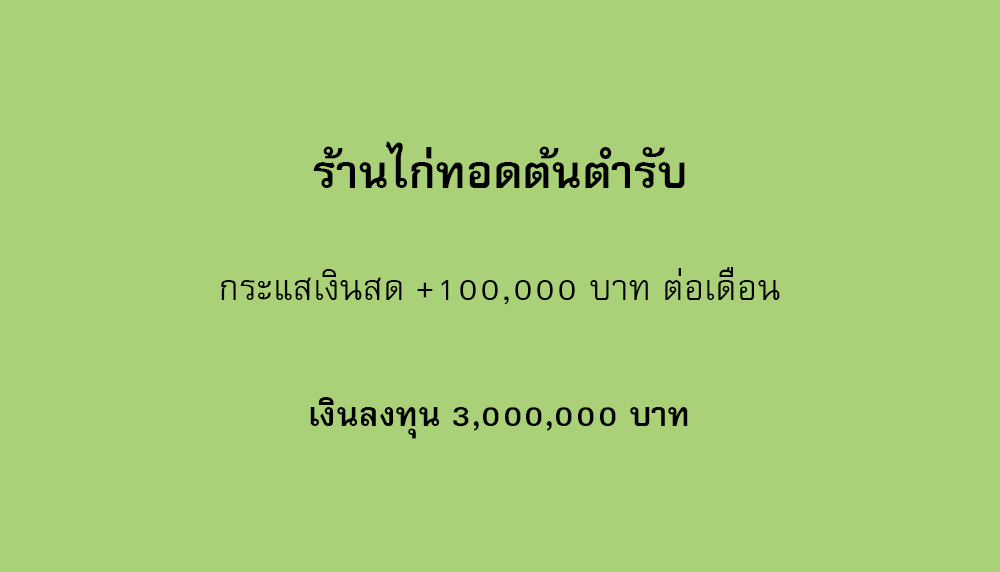
<style>
.page{position:relative;width:1000px;height:572px;background:#aad178}
.page>*{position:absolute;margin:0}
.t1{font:64px "FreesiaUPCBold";color:#000000}
.t2{font:50px "FreesiaUPC";color:#000000}
.t3{font:47px "FreesiaUPCBold";color:#000000}
</style>
<div class="page">
<p class="t1" style="left:313px;top:141px;width:372px;height:47px">ร้านไก่ทอดต้นตำรับ</p>
<p class="t2" style="left:221px;top:267px;width:559px;height:38px">กระแสเงินสด +100,000 บาท ต่อเดือน</p>
<p class="t3" style="left:310px;top:397px;width:378px;height:42px">เงินลงทุน 3,000,000 บาท</p>
</div>
